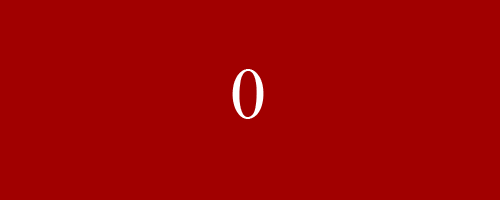
<style>
.page{position:relative;width:500px;height:200px;background:#a10000}
.page>*{position:absolute;margin:0}
.t1{font:72px "TimesNewRomanPSMT";color:#ffffff}
</style>
<div class="page">
<p class="t1" style="left:232px;top:69px;width:32px;height:50px">0</p>
</div>
